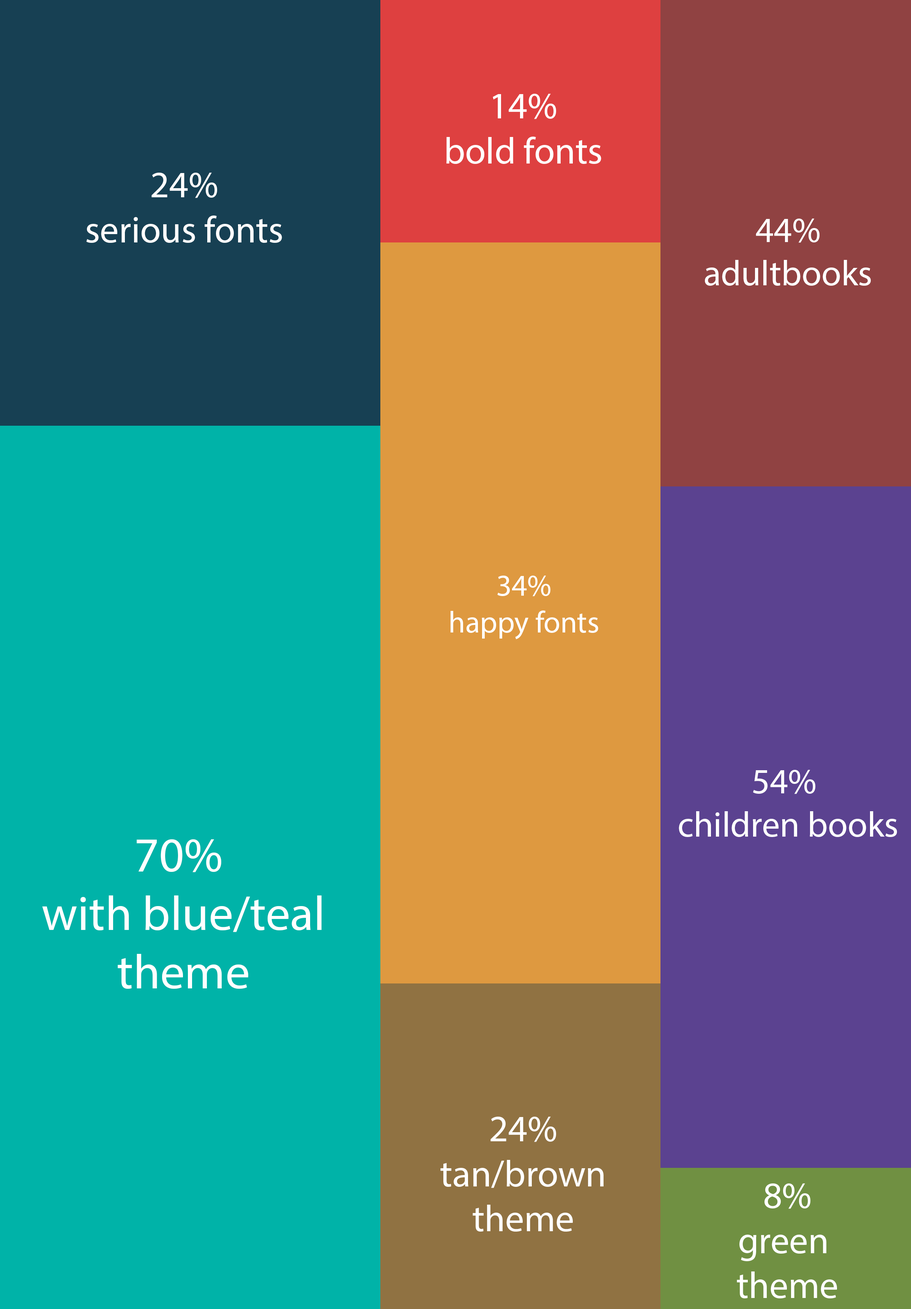
<style>
.page{position:relative;width:911px;height:1309px;background:#00b3a8}
.page>*{position:absolute;margin:0}
.t1{font:37.5px "MyriadPro-Regular";color:#ffffff}
.t2{font:35.9px "MyriadPro-Regular";color:#ffffff}
.t3{font:30.4px "MyriadPro-Regular";color:#ffffff}
.t4{font:48.8px "MyriadPro-Regular";color:#ffffff}
</style>
<div class="page">
<p class="t1" style="left:446px;top:94px;width:155px;height:70px;text-align:center">14%<br>bold fonts</p>
<p class="t1" style="left:86px;top:173px;width:196px;height:70px;text-align:center">24%<br>serious fonts</p>
<p class="t2" style="left:705px;top:219px;width:166px;height:67px;text-align:center">44%<br>adultbooks</p>
<p class="t3" style="left:450px;top:576px;width:148px;height:63px;text-align:center">34%<br>happy fonts</p>
<p class="t2" style="left:679px;top:770px;width:218px;height:67px;text-align:center">54% <br>children books</p>
<p class="t4" style="left:42px;top:839px;width:279px;height:150px;text-align:center">70% <br>with blue/teal<br>theme</p>
<p class="t1" style="left:440px;top:1117px;width:163px;height:115px;text-align:center">24%<br>tan/brown<br>theme</p>
<p class="t1" style="left:737px;top:1184px;width:100px;height:115px;text-align:center">8%<br>green <br>theme</p>
</div>
